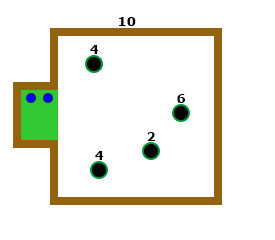
<style>
.page{position:relative;width:275px;height:240px;background:#ffffff}
.page>*{position:absolute;margin:0}
.t1{font:13px "Verdana-Bold";color:#000000}
</style>
<div class="page">
<p class="t1" style="left:119px;top:17px;width:17px;height:9px">10</p>
<p class="t1" style="left:90px;top:45px;width:9px;height:9px">4</p>
<p class="t1" style="left:177px;top:94px;width:9px;height:9px">6</p>
<p class="t1" style="left:147px;top:132px;width:9px;height:9px">2</p>
<p class="t1" style="left:95px;top:151px;width:9px;height:9px">4</p>
</div>
